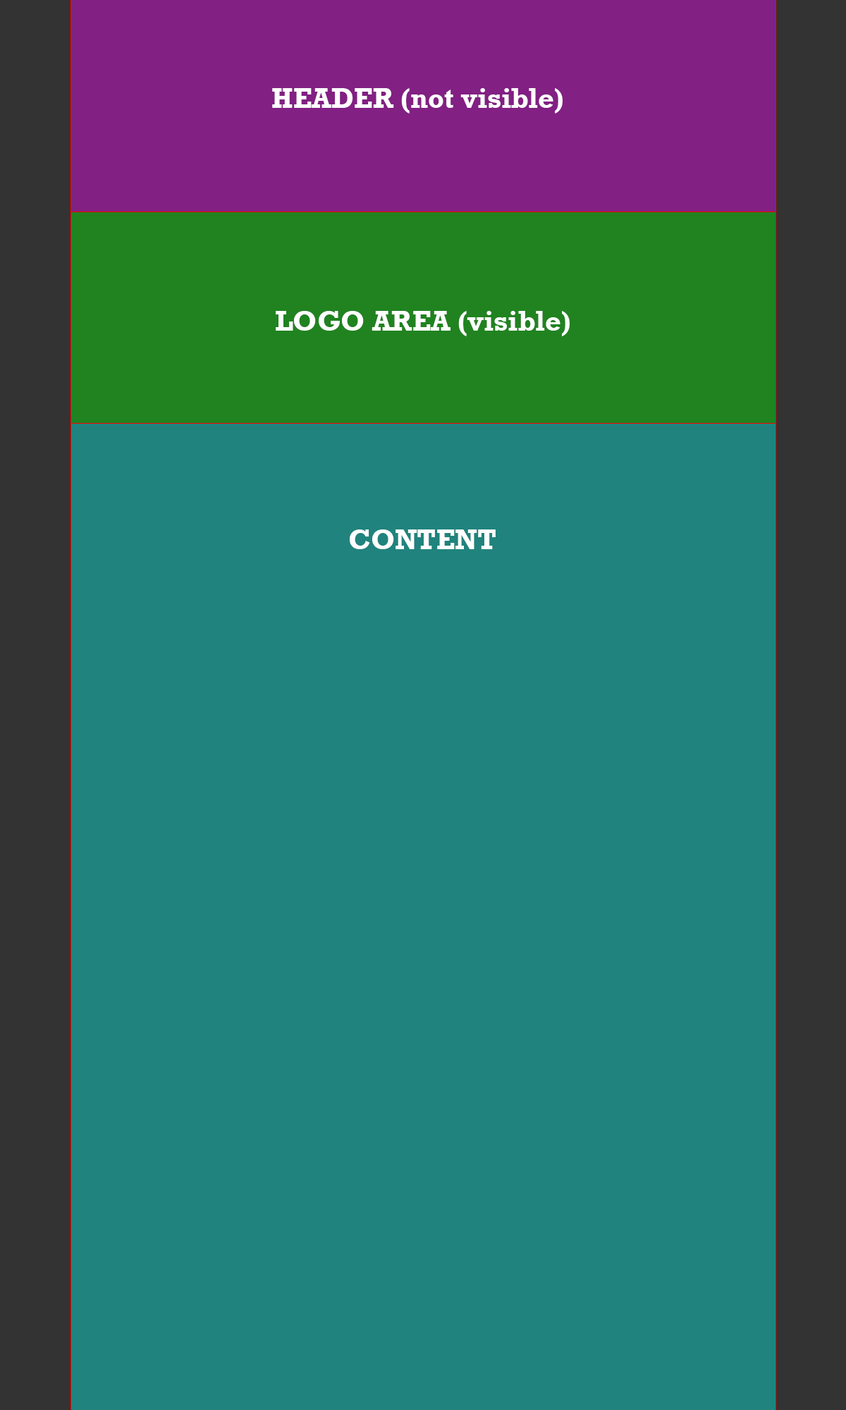
<style>
.page{position:relative;width:846px;height:1410px;background:#20837d}
.page>*{position:absolute;margin:0}
.t1{font:28.2px "Rockwell-Bold";color:#ffffff}
</style>
<div class="page">
<p class="t1" style="left:272px;top:88px;width:290px;height:25px">HEADER (not visible)</p>
<p class="t1" style="left:276px;top:311px;width:294px;height:25px">LOGO AREA (visible)</p>
<p class="t1" style="left:350px;top:529px;width:146px;height:20px">CONTENT</p>
</div>
